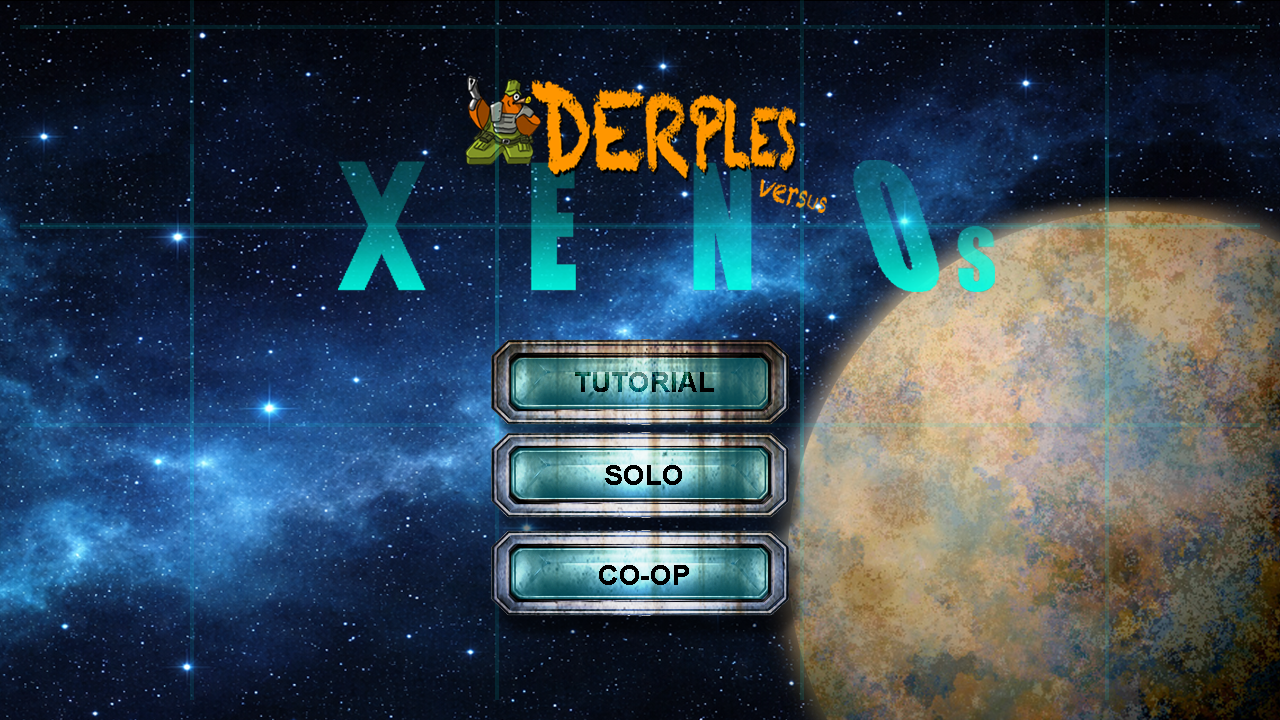
<style>
.page{position:relative;width:1280px;height:720px}
.page>*{position:absolute;margin:0}
.t1{font:28px "Arial-BoldMT"}
.t2{font:28px "Arial-BoldMT";color:#000000}
</style>
<div class="page">
<p class="t1" style="left:575px;top:372px;width:139px;height:20px">TUTORIAL</p>
<p class="t1" style="left:575px;top:372px;width:139px;height:20px">TUTORIAL</p>
<p class="t2" style="left:605px;top:465px;width:77px;height:20px">SOLO</p>
<p class="t2" style="left:599px;top:565px;width:90px;height:20px">CO-OP</p>
</div>
